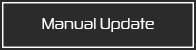
<style>
.page{position:relative;width:196px;height:50px;background:#2b2b2b}
.page>*{position:absolute;margin:0}
.t1{font:16px "ZektonRg-Regular";color:#ffffff}
</style>
<div class="page">
<p class="t1" style="left:42px;top:18px;width:112px;height:14px">Manual Update</p>
</div>
